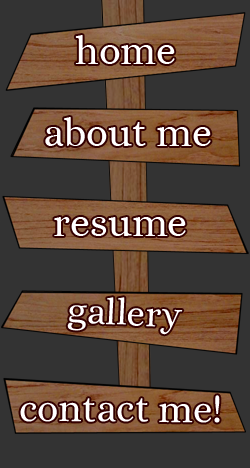
<style>
.page{position:relative;width:250px;height:468px;background:#333333}
.page>*{position:absolute;margin:0}
.t1{font:40px "Alice-Regular";color:#ffffff}
.t2{font:37.1px "Alice-Regular";color:#ffffff}
.t3{font:39px "Alice-Regular";color:#ffffff}
</style>
<div class="page">
<p class="t1" style="left:75px;top:35px;width:100px;height:29px">home</p>
<p class="t1" style="left:45px;top:117px;width:166px;height:29px">about me</p>
<p class="t1" style="left:54px;top:217px;width:132px;height:19px">resume</p>
<p class="t2" style="left:67px;top:297px;width:116px;height:38px;rotate:3deg">gallery</p>
<p class="t3" style="left:20px;top:395px;width:200px;height:28px">contact me!</p>
</div>
